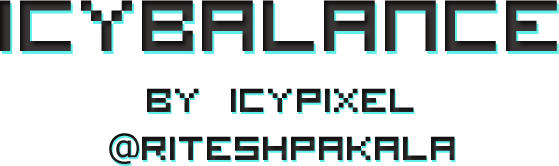
<style>
.page{position:relative;width:559px;height:166px;background:#ffffff}
.page>*{position:absolute;margin:0}
.t1{font:130px "VisitorTT2BRK";color:#2e2d2d}
.t2{font:60px/24px "VisitorTT2BRK";color:#2e2d2d}
.t3{font:36px/24px "Verdana";color:#2e2d2d}
</style>
<div class="page">
<p class="t1" style="left:0px;top:0px;width:557px;height:51px">icybalance</p>
<p class="t2" style="left:109px;top:88px;width:346px;height:76px;text-align:center">by icypixel<br><br><span class="t3">@</span>riteshpakala</p>
</div>
